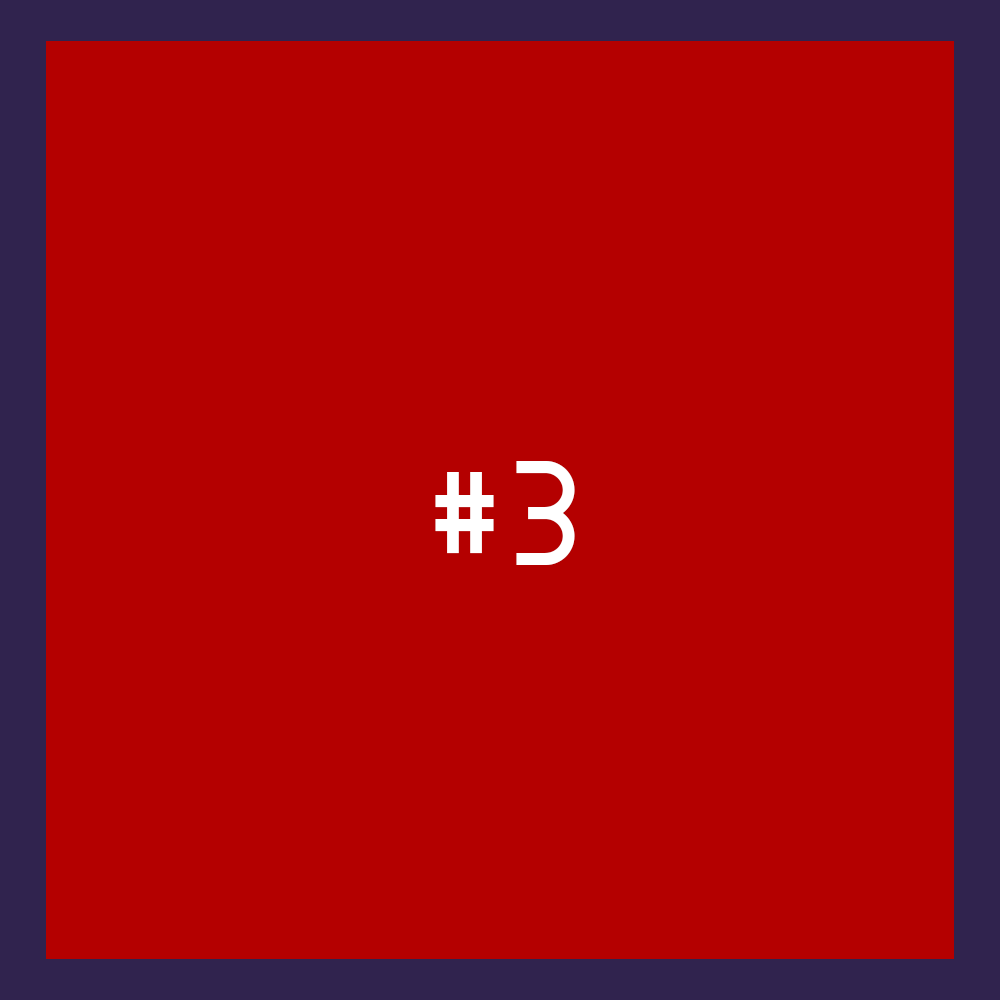
<style>
.page{position:relative;width:1000px;height:1000px;background:#b40000}
.page>*{position:absolute;margin:0}
.t1{font:150px "EnvyCodeR";color:#ffffff}
</style>
<div class="page">
<p class="t1" style="left:435px;top:461px;width:140px;height:104px">#3</p>
</div>
